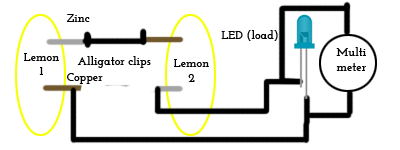
<style>
.page{position:relative;width:400px;height:150px;background:#ffffff}
.page>*{position:absolute;margin:0}
.t1{font:12px "JosefinSlab-Bold";color:#000000}
</style>
<div class="page">
<p class="t1" style="left:67px;top:14px;width:23px;height:8px">Zinc</p>
<p class="t1" style="left:221px;top:30px;width:57px;height:11px">LED (load)</p>
<p class="t1" style="left:24px;top:53px;width:35px;height:22px;text-align:center">Lemon<br>1</p>
<p class="t1" style="left:336px;top:47px;width:30px;height:24px;text-align:center">Multi<br>meter</p>
<p class="t1" style="left:77px;top:56px;width:74px;height:12px">Alligator clips</p>
<p class="t1" style="left:174px;top:59px;width:35px;height:23px;text-align:center">Lemon<br>2</p>
<p class="t1" style="left:67px;top:73px;width:36px;height:11px">Copper</p>
</div>
